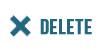
<style>
.page{position:relative;width:100px;height:50px;background:#ffffff}
.page>*{position:absolute;margin:0}
.t1{font:20.8px "BebasNeue";letter-spacing:0.025em;color:#236883;font-weight:bold}
</style>
<div class="page">
<p class="t1" style="left:40px;top:19px;width:52px;height:16px">delete</p>
</div>
